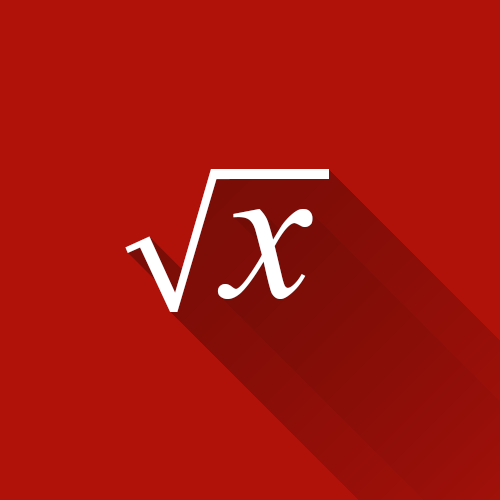
<style>
.page{position:relative;width:500px;height:500px;background:#b0120a}
.page>*{position:absolute;margin:0}
.t1{font:148.5px "Cambria";letter-spacing:-0.02em;color:#ffffff}
.t2{font:200px "TimesNewRomanPS-ItalicMT";letter-spacing:-0.02em;color:#ffffff}
</style>
<div class="page">
<p class="t1" style="left:125px;top:169px;width:105px;height:143px">√</p>
<p class="t2" style="left:217px;top:209px;width:96px;height:90px">x</p>
</div>
